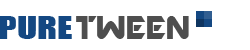
<style>
.page{position:relative;width:250px;height:50px;background:#ffffff}
.page>*{position:absolute;margin:0}
.t1{font:29.1px "Impact";color:#144882;scale:1.29 1}
.t2{font:36px "ARDESTINE";color:#4e4e4e}
</style>
<div class="page">
<p class="t1" style="left:0px;top:16px;width:72px;height:23px">PURE</p>
<p class="t2" style="left:76px;top:16px;width:113px;height:23px">TWEEN</p>
</div>
